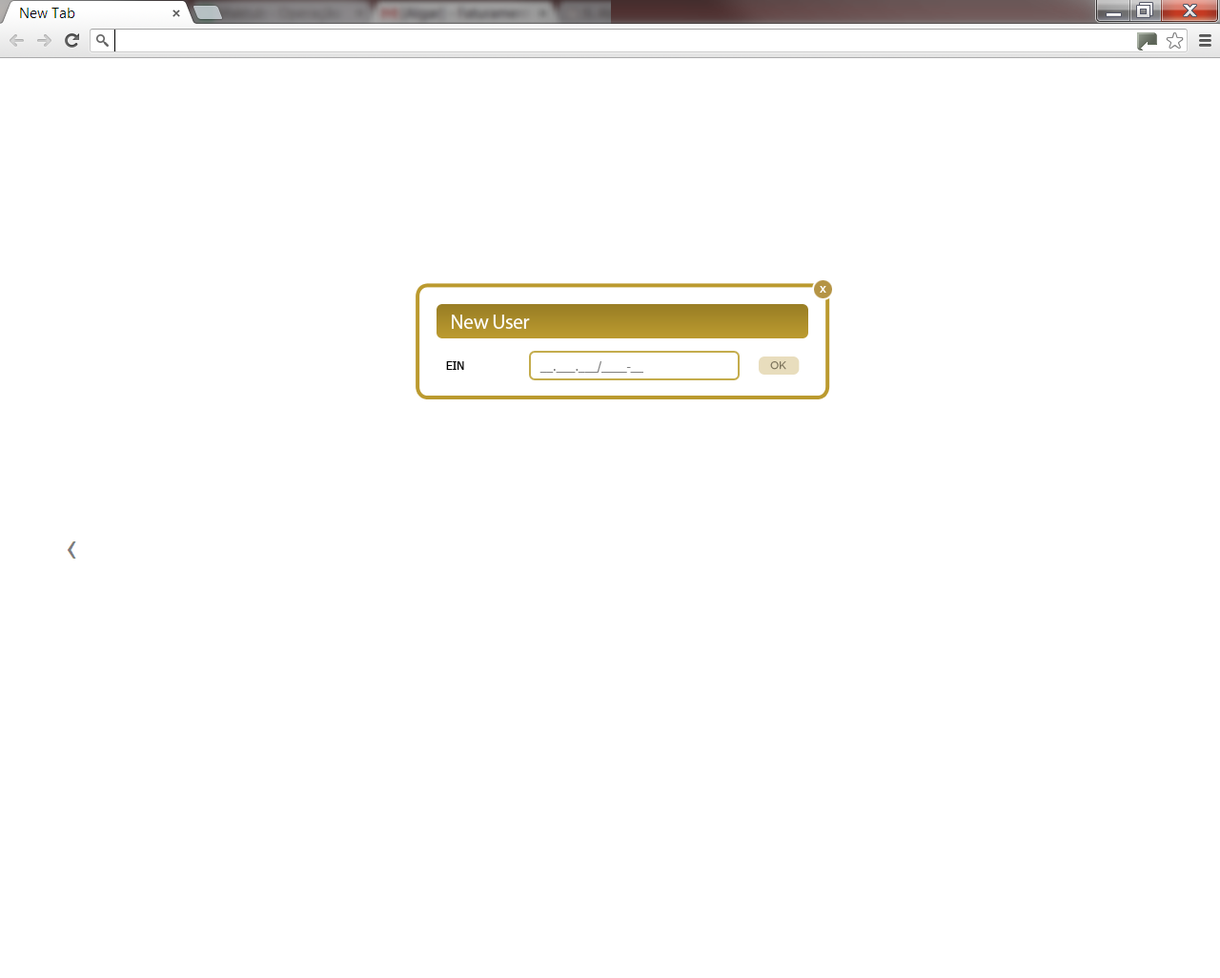
<style>
.page{position:relative;width:1220px;height:978px;background:#ffffff}
.page>*{position:absolute;margin:0}
.t1{font:21px "MyriadPro-Regular";letter-spacing:-0.025em;color:#ffffff}
.t2{font:11.4px "Tahoma";color:#000000}
.t3{font:11.4px "Tahoma";color:#7f7f7f}
.t4{font:10.5px "Gotham-Book";letter-spacing:-0.025em;color:#7e755d}
</style>
<div class="page">
<p class="t1" style="left:452px;top:314px;width:78px;height:15px">New User</p>
<p class="t2" style="left:446px;top:361px;width:18px;height:9px">EIN</p>
<p class="t3" style="left:539px;top:361px;width:104px;height:12px">__.___.___/____-__</p>
<p class="t4" style="left:770px;top:361px;width:16px;height:9px">OK</p>
</div>
